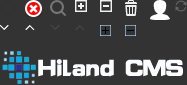
<style>
.page{position:relative;width:187px;height:85px;background:#333333}
.page>*{position:absolute;margin:0}
.t1{font:24px "HYk2gj";letter-spacing:-0.05em;color:#fbfcfd}
</style>
<div class="page">
<p class="t1" style="left:38px;top:59px;width:145px;height:18px">Hiland CMS</p>
</div>
